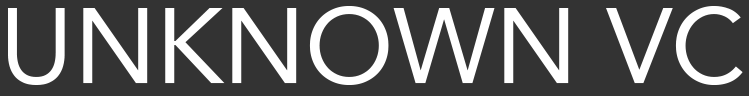
<style>
.page{position:relative;width:749px;height:96px;background:#333333}
.page>*{position:absolute;margin:0}
.t1{font:105.8px "Avenir-Roman";color:#ffffff}
</style>
<div class="page">
<p class="t1" style="left:8px;top:6px;width:735px;height:79px">UNKNOWN VC</p>
</div>
